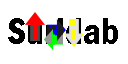
<style>
.page{position:relative;width:128px;height:64px;background:#ffffff}
.page>*{position:absolute;margin:0}
.t1{font:38px "FranklinGothic-DemiCond";color:#000000}
</style>
<div class="page">
<p class="t1" style="left:8px;top:18px;width:110px;height:26px">Surldab</p>
</div>
